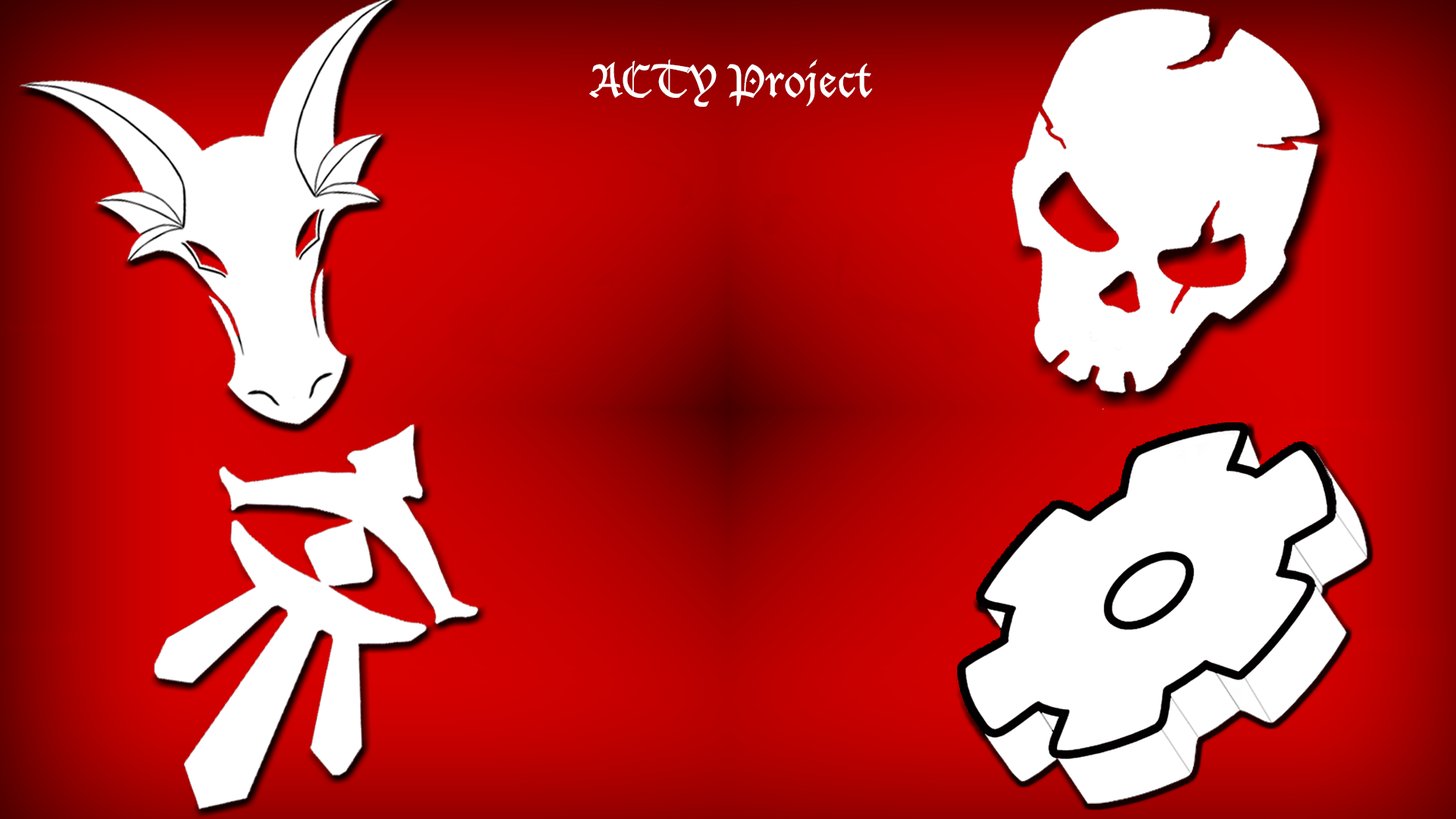
<style>
.page{position:relative;width:1456px;height:819px}
.page>*{position:absolute;margin:0}
.t1{font:44.2px "LucidaBlackletter";color:#ffffff}
</style>
<div class="page">
<p class="t1" style="left:589px;top:59px;width:284px;height:48px">ACTY Project</p>
</div>
